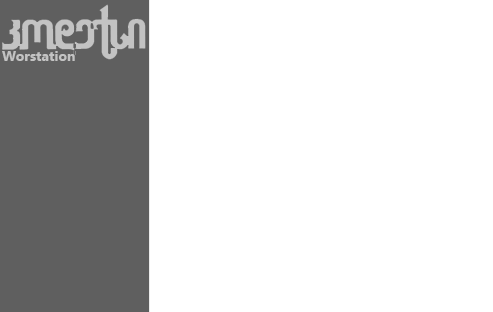
<style>
.page{position:relative;width:493px;height:312px;background:#ffffff}
.page>*{position:absolute;margin:0}
.t1{font:14px "SegoeUI-Bold";color:#c3c3c3}
</style>
<div class="page">
<p class="t1" style="left:2px;top:51px;width:73px;height:10px">Worstation</p>
</div>
